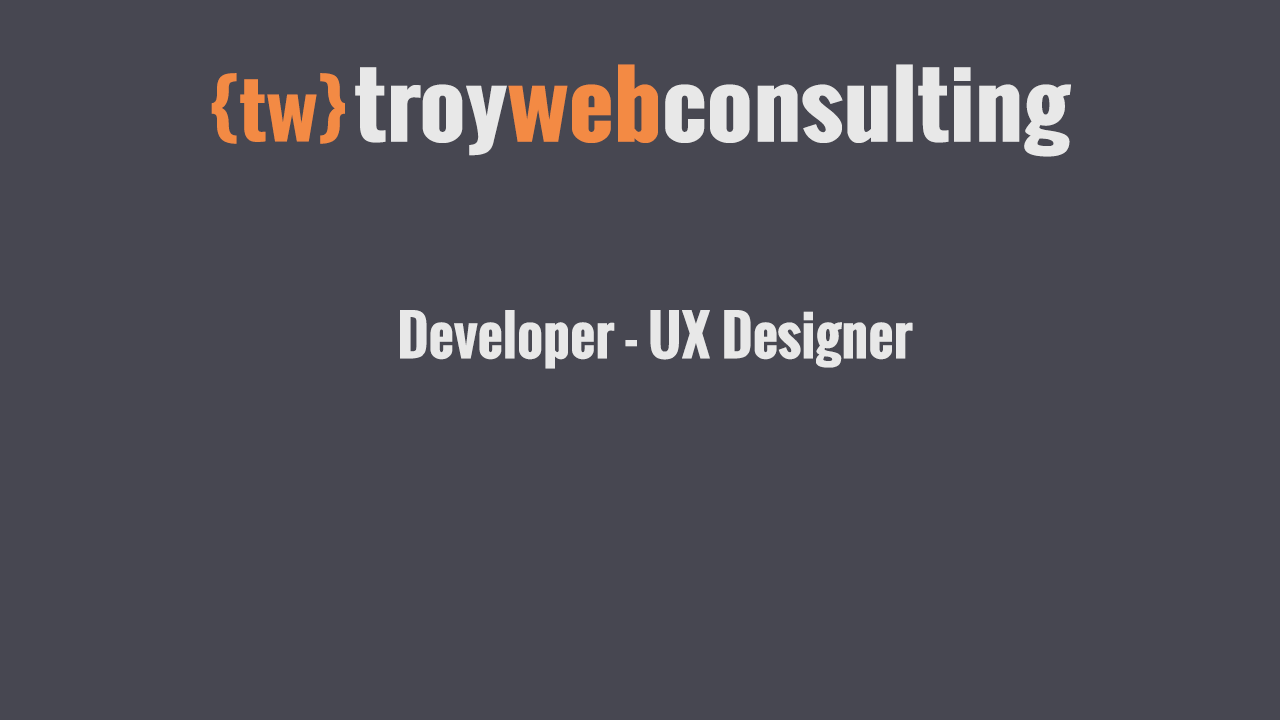
<style>
.page{position:relative;width:1280px;height:720px;background:#474751}
.page>*{position:absolute;margin:0}
.t1{font:87.7px "Oswald-Bold";color:#e8e8e8;scale:1.12 1}
.t2{font:87.7px "Oswald-Bold";color:#f38a44;scale:1.12 1}
.t3{font:73.1px "Oswald-Bold";color:#f38a44;scale:1.12 1}
.t4{font:55px "Oswald-Bold";color:#e8e8e8}
</style>
<div class="page">
<p class="t1" style="left:355px;top:64px;width:716px;height:93px">troy<span class="t2">web</span>consulting</p>
<p class="t3" style="left:211px;top:73px;width:134px;height:71px">{tw}</p>
<p class="t4" style="left:400px;top:310px;width:513px;height:59px">Developer - UX Designer</p>
</div>
